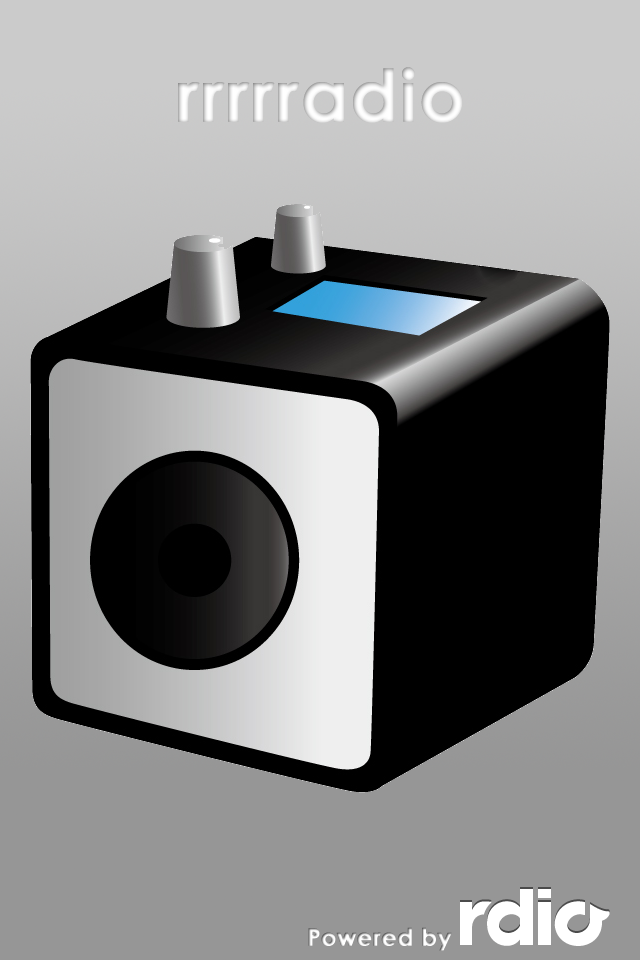
<style>
.page{position:relative;width:640px;height:960px}
.page>*{position:absolute;margin:0}
.t1{font:72px "CenturyGothic-Bold";color:#ffffff;font-weight:bold}
.t2{font:24px "CenturyGothic-Bold";font-weight:bold}
</style>
<div class="page">
<p class="t1" style="left:178px;top:67px;width:285px;height:56px">rrrrradio</p>
<p class="t2" style="left:308px;top:927px;width:144px;height:24px">Powered by</p>
</div>
